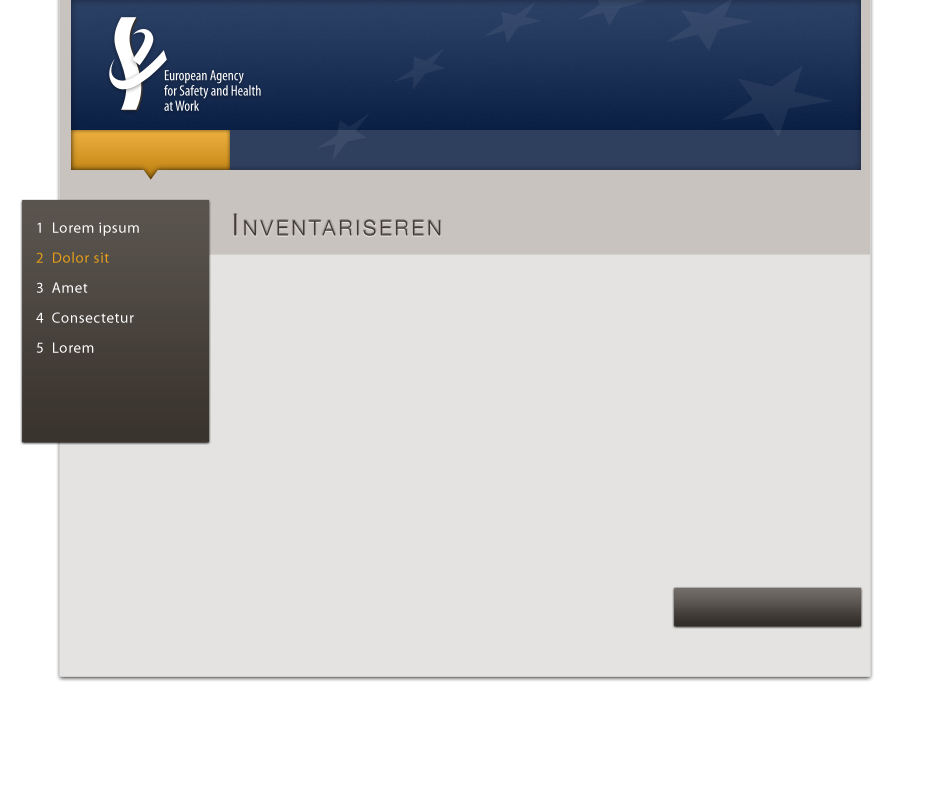
<style>
.page{position:relative;width:930px;height:800px;background:#e5e3e1}
.page>*{position:absolute;margin:0}
.t1{font:15px/30px "MyriadPro-Regular";letter-spacing:0.04em;color:#ffffff}
.t2{font:15px/30px "MyriadPro-Regular";letter-spacing:0.04em;color:#e69d17}
.t3{font:30px "HelveticaNeue-Light";letter-spacing:0.14em;color:#423b35;font-variant:small-caps}
</style>
<div class="page">
<p class="t1" style="left:36px;top:222px;width:103px;height:131px">1  Lorem ipsum<br><span class="t2">2  Dolor sit<br></span>3  Amet<br>4  Consectetur<br>5  Lorem</p>
<p class="t3" style="left:234px;top:214px;width:207px;height:22px">Inventariseren</p>
</div>
